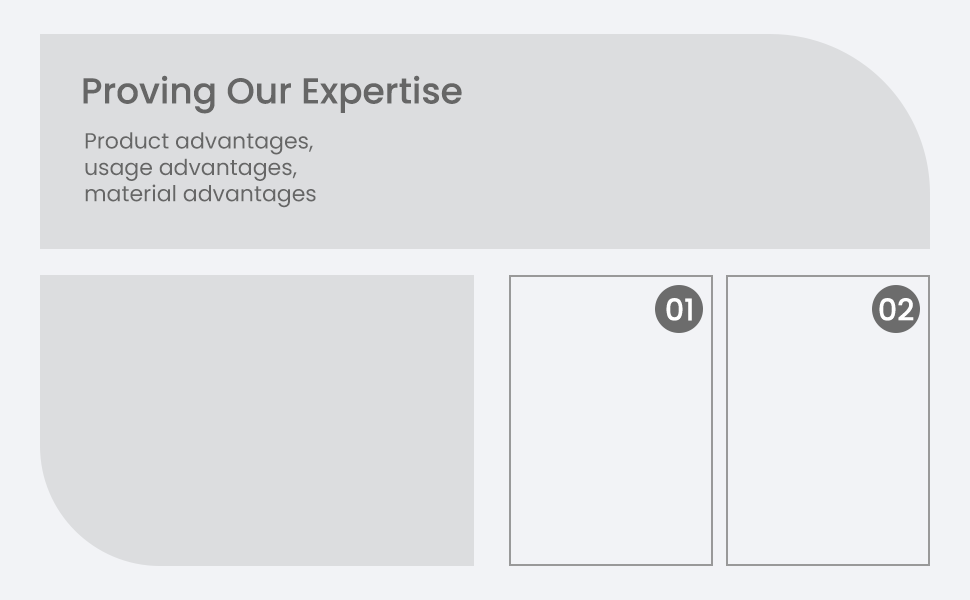
<style>
.page{position:relative;width:970px;height:600px;background:#dcdddf}
.page>*{position:absolute;margin:0}
.t1{font:36px "Poppins-Medium";color:#666666}
.t2{font:22px "Poppins-Regular";color:#666666}
.t3{font:30px "Poppins-Medium";color:#ffffff}
</style>
<div class="page">
<p class="t1" style="left:83px;top:75px;width:379px;height:39px">Proving Our Expertise</p>
<p class="t2" style="left:85px;top:132px;width:231px;height:76px">Product advantages, <br>usage advantages,<br>material advantages</p>
<p class="t3" style="left:666px;top:298px;width:26px;height:23px">01</p>
<p class="t3" style="left:879px;top:298px;width:35px;height:23px">02</p>
</div>
